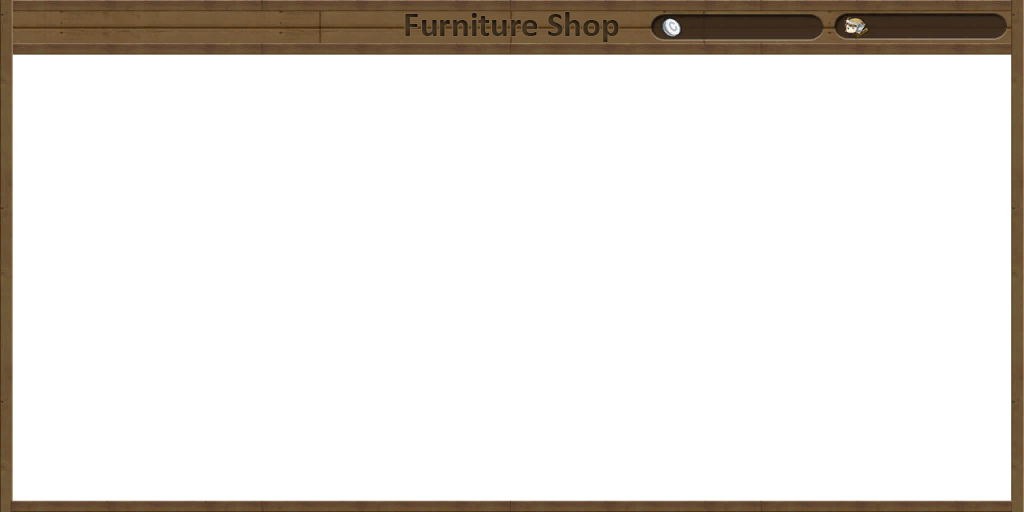
<style>
.page{position:relative;width:1024px;height:512px;background:#ffffff}
.page>*{position:absolute;margin:0}
.t1{font:35px "Calibri-Bold";color:#35291a}
</style>
<div class="page">
<p class="t1" style="left:405px;top:12px;width:214px;height:30px">Furniture Shop</p>
</div>
